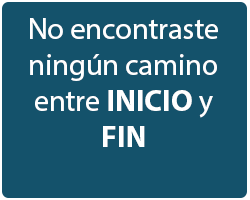
<style>
.page{position:relative;width:250px;height:200px;background:#14526b}
.page>*{position:absolute;margin:0}
.t1{font:30px "MyriadHebrew-Regular";color:#ffffff}
.t2{font:30px "MyriadHebrew-Bold";color:#ffffff}
</style>
<div class="page">
<p class="t1" style="left:30px;top:18px;width:188px;height:129px;text-align:center">No encontraste ningún camino entre <span class="t2">INICIO</span> y <span class="t2">FIN</span></p>
</div>
